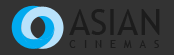
<style>
.page{position:relative;width:174px;height:55px;background:#333333}
.page>*{position:absolute;margin:0}
.t1{font:36px "TrebuchetMS";color:#1c1c1c}
.t2{font:11px "TrebuchetMS";letter-spacing:0.725em;color:#1c1c1c}
</style>
<div class="page">
<p class="t1" style="left:69px;top:9px;width:91px;height:26px">ASIAN</p>
<p class="t2" style="left:69px;top:40px;width:90px;height:8px">CINEMAS</p>
</div>
